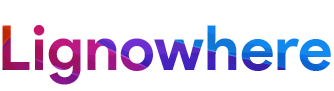
<style>
.page{position:relative;width:334px;height:91px;background:#ffffff}
.page>*{position:absolute;margin:0}
.t1{font:61.9px "ProductSans-Bold"}
</style>
<div class="page">
<p class="t1" style="left:2px;top:25px;width:329px;height:60px">Lignowhere</p>
</div>
